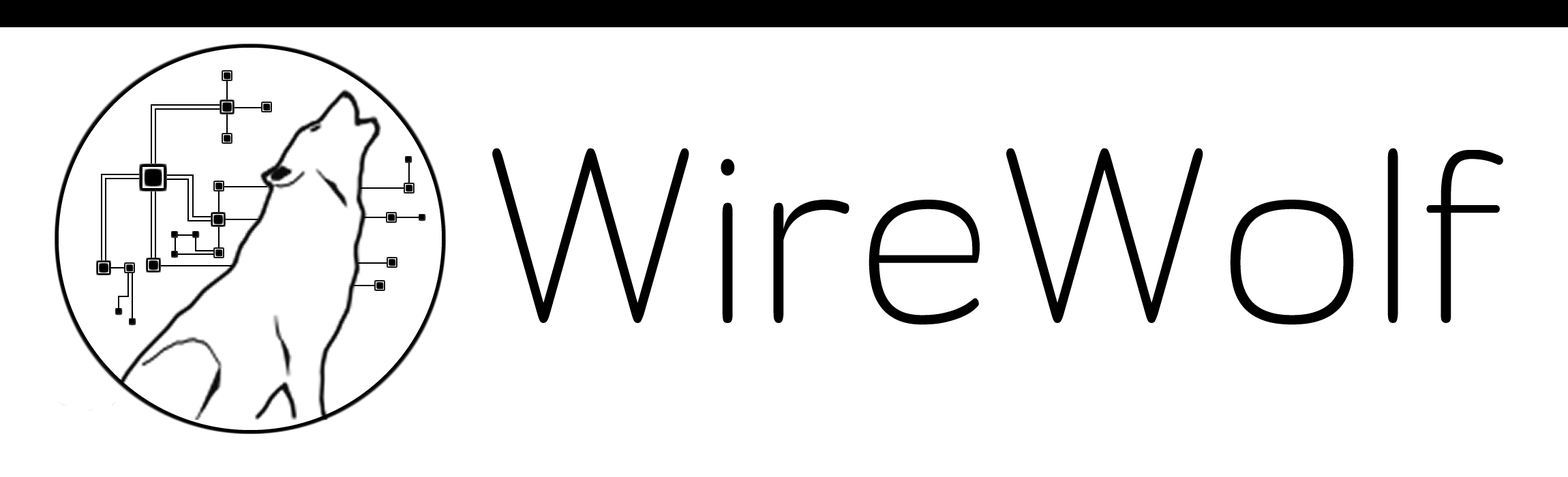
<style>
.page{position:relative;width:1568px;height:477px;background:#ffffff}
.page>*{position:absolute;margin:0}
.t1{font:321px "Gruppo";color:#000000;scale:0.79 1}
</style>
<div class="page">
<p class="t1" style="left:492px;top:148px;width:1011px;height:177px">WireWolf</p>
</div>
